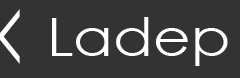
<style>
.page{position:relative;width:240px;height:78px;background:#333333}
.page>*{position:absolute;margin:0}
.t1{font:103.5px "CenturyGothic";color:#ffffff;scale:0.38 1}
.t2{font:53.1px "CenturyGothic";color:#ffffff;scale:1.1 1}
</style>
<div class="page">
<p class="t1" style="left:0px;top:9px;width:20px;height:55px">&lt;</p>
<p class="t2" style="left:52px;top:17px;width:176px;height:49px">Ladep</p>
</div>
